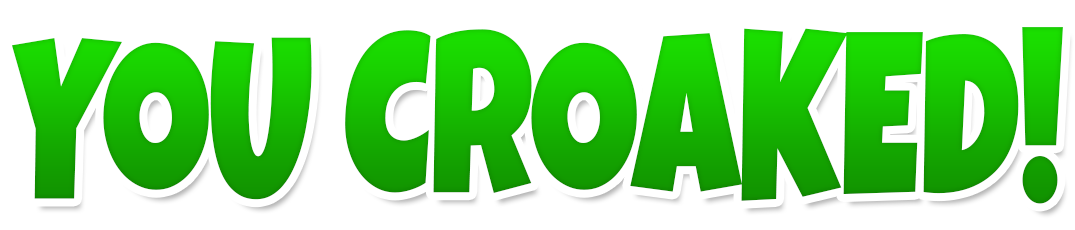
<style>
.page{position:relative;width:1075px;height:230px;background:#ffffff}
.page>*{position:absolute;margin:0}
.t1{font:230px "LuckiestGuy-Regular";letter-spacing:-0.01em;text-transform:uppercase;scale:0.74 1}
</style>
<div class="page">
<p class="t1" style="left:12px;top:27px;width:1051px;height:177px">you croaked!</p>
</div>
